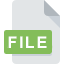
<style>
.page{position:relative;width:64px;height:64px;background:#e2e5e7}
.page>*{position:absolute;margin:0}
.t1{font:16px "Arial-BoldMT";letter-spacing:0.1em;color:#ffffff}
</style>
<div class="page">
<p class="t1" style="left:8px;top:36px;width:39px;height:12px">FILE</p>
</div>
